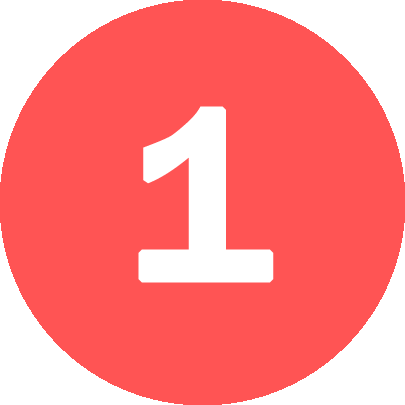
<style>
.page{position:relative;width:405px;height:405px;background:#ff5454}
.page>*{position:absolute;margin:0}
.t1{font:250px "FranklinGothic-Medium";color:#ffffff;font-weight:bold}
</style>
<div class="page">
<p class="t1" style="left:138px;top:106px;width:136px;height:177px">1</p>
</div>
